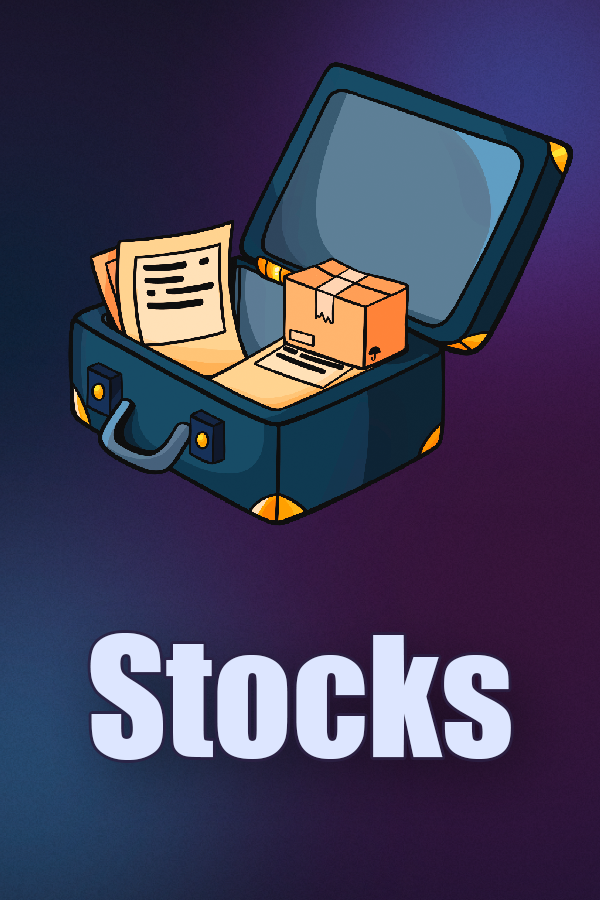
<style>
.page{position:relative;width:600px;height:900px}
.page>*{position:absolute;margin:0}
.t1{font:153.7px "Impact";color:#dde6ff}
</style>
<div class="page">
<p class="t1" style="left:90px;top:633px;width:421px;height:127px">Stocks</p>
</div>
